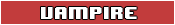
<style>
.page{position:relative;width:175px;height:25px;background:#c23c3c}
.page>*{position:absolute;margin:0}
.t1{font:14px "8BITWONDERNominal";color:#ffffff}
</style>
<div class="page">
<p class="t1" style="left:41px;top:7px;width:96px;height:12px">Vampire</p>
</div>
